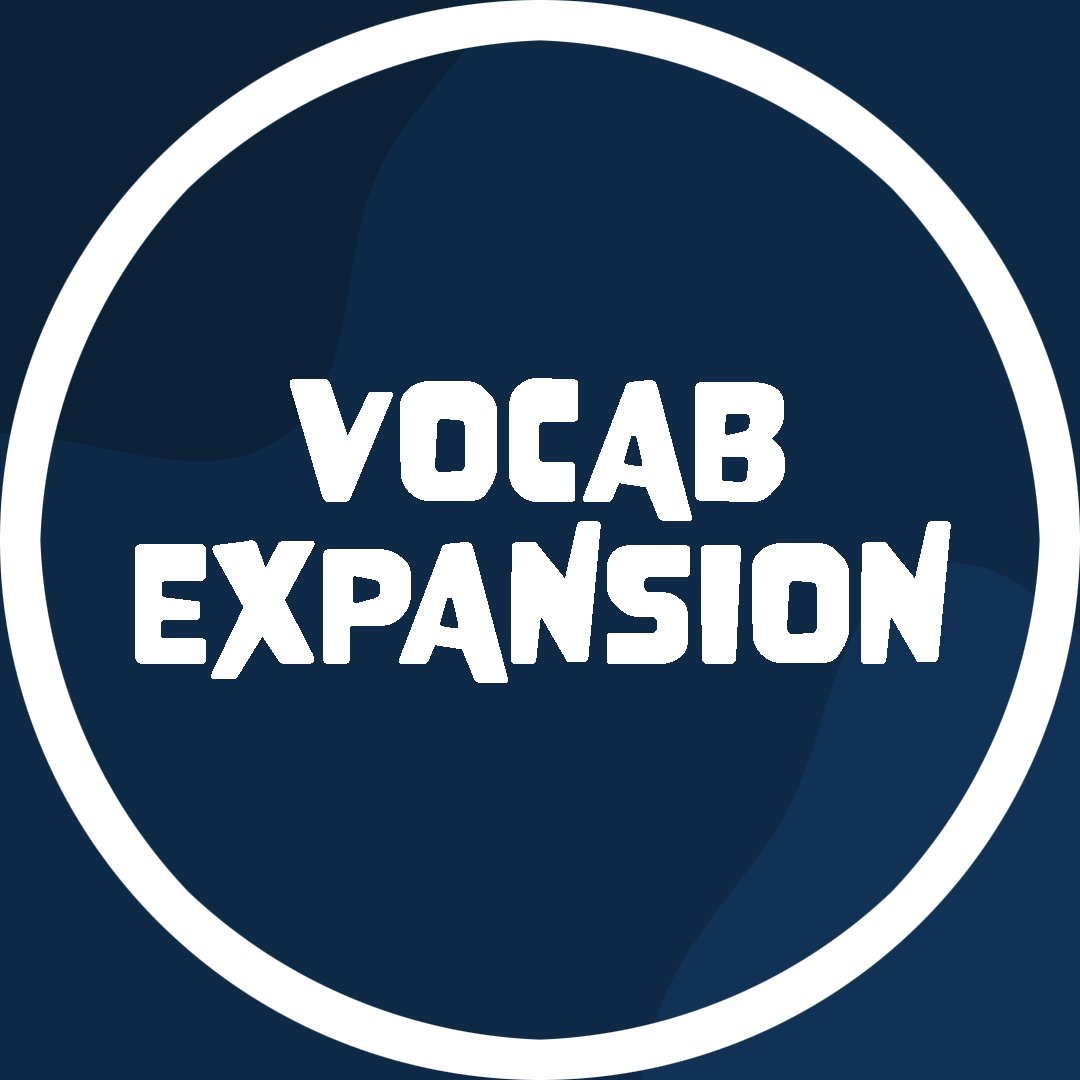
<style>
.page{position:relative;width:1080px;height:1080px;background:#0e2a47}
.page>*{position:absolute;margin:0}
.t1{font:154.2px/162.5px "Nove";color:#ffffff}
</style>
<div class="page">
<p class="t1" style="left:135px;top:378px;width:816px;height:305px;text-align:center">VOCAB<br>EXPANSION</p>
</div>
